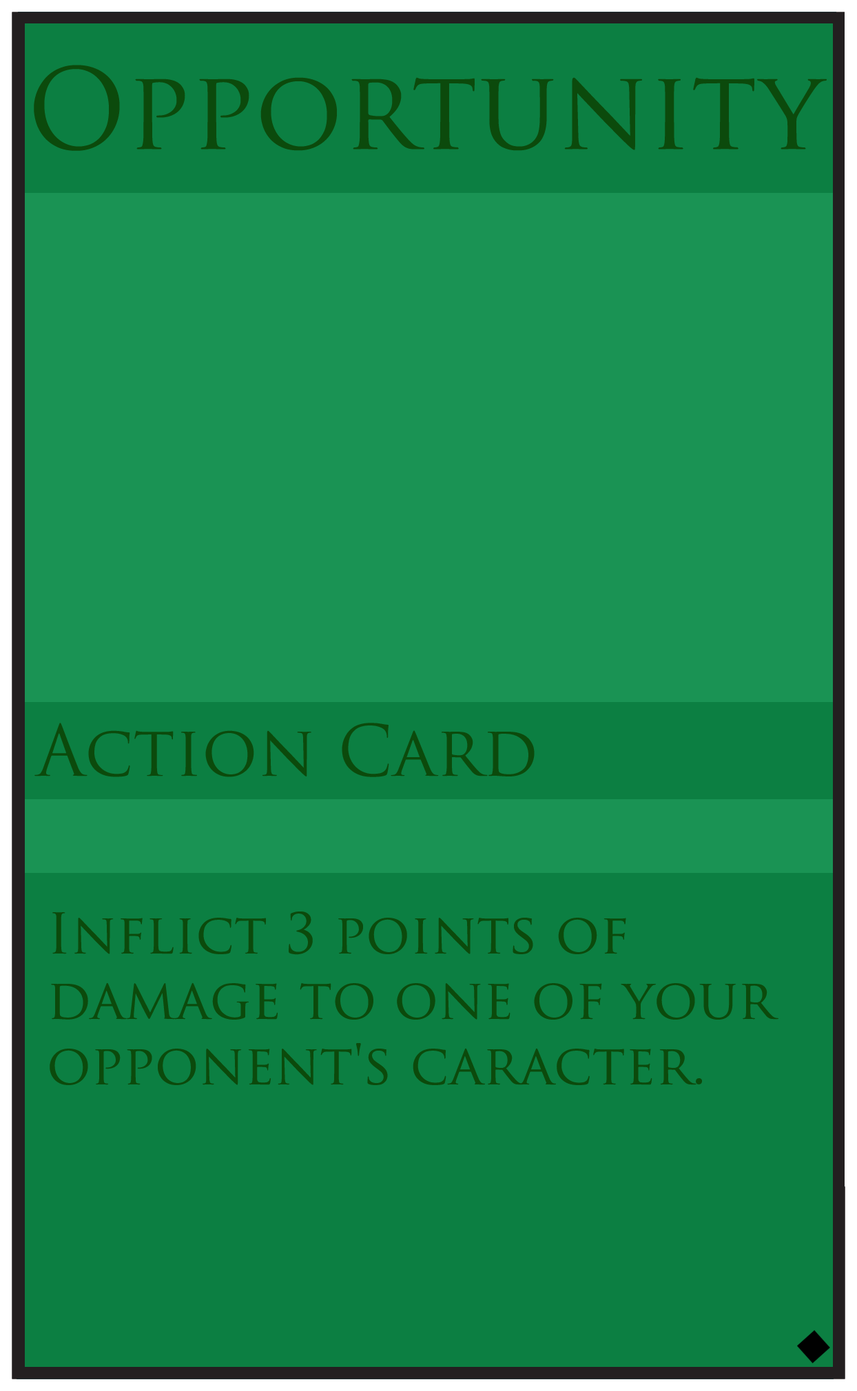
<style>
.page{position:relative;width:857px;height:1391px;background:#0c7f42}
.page>*{position:absolute;margin:0}
.t1{font:109.1px "TrajanPro-Regular";color:#0c4a0c}
.t2{font:68.9px "TrajanPro-Regular";color:#0c4a0c}
.t3{font:54.5px "TrajanPro-Regular";color:#0c4a0c}
</style>
<div class="page">
<p class="t1" style="left:34px;top:65px;width:793px;height:86px">Opportunity</p>
<p class="t2" style="left:34px;top:723px;width:501px;height:54px">Action Card</p>
<p class="t3" style="left:50px;top:912px;width:729px;height:173px">Inflict 3 points of <br>damage to one of your <br>opponent's caracter.</p>
</div>
